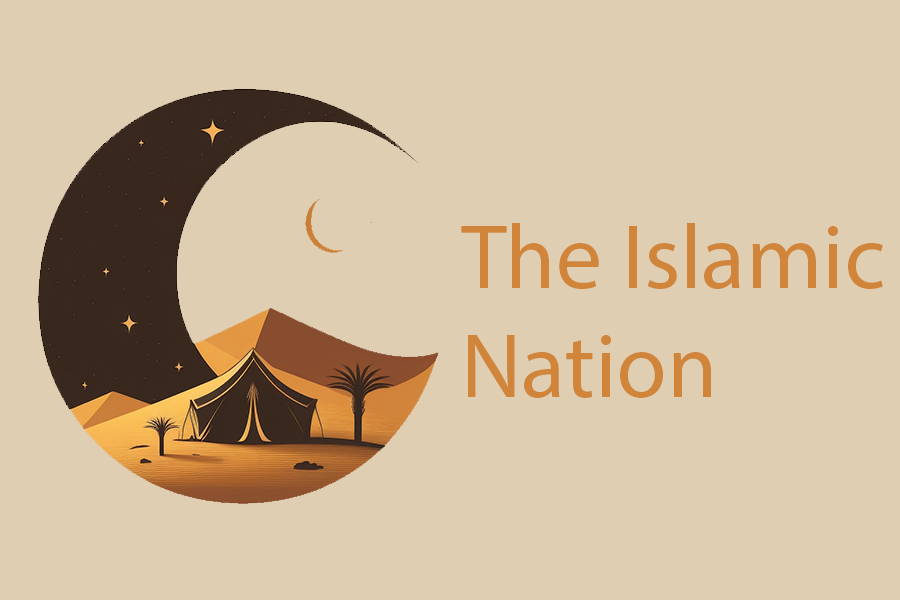
<style>
.page{position:relative;width:900px;height:600px;background:#dfceb2}
.page>*{position:absolute;margin:0}
.t1{font:91.7px "MyriadPro-Regular";color:#d1853a}
</style>
<div class="page">
<p class="t1" style="left:461px;top:223px;width:422px;height:175px">The Islamic<br>Nation</p>
</div>
